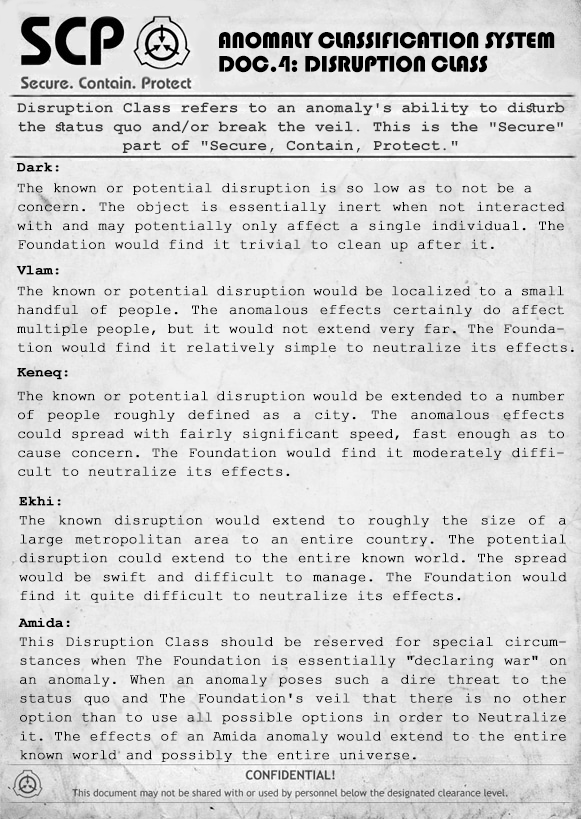
<style>
.page{position:relative;width:581px;height:819px}
.page>*{position:absolute;margin:0}
.t1{font:23.6px/23.6px "Bauhaus93";letter-spacing:-0.025em;color:#000000;text-transform:uppercase}
.t2{font:15.7px "CourierNewPS-BoldMT";letter-spacing:0.01em;color:#343434}
.t3{font:14.2px "CourierNewPS-BoldMT";color:#000000;font-weight:bold}
.t4{font:14.2px/18.9px "CourierNewPSMT";color:#000000;font-weight:bold}
.t5{font:14.2px/18.9px "CourierNewPS-BoldMT";color:#000000;font-weight:bold}
</style>
<div class="page">
<p class="t1" style="left:219px;top:32px;width:336px;height:41px">Anomaly Classification System<br>Doc.4: Disruption Class</p>
<p class="t2" style="left:17px;top:102px;width:548px;height:51px;text-align:center">Disruption Class refers to an anomaly's ability to disturb the status quo and/or break the veil. This is the "Secure" part of "Secure, Contain, Protect."</p>
<p class="t3" style="left:17px;top:162px;width:42px;height:10px">Dark:</p>
<p class="t4" style="left:17px;top:183px;width:548px;height:69px;text-align:justify">The known or potential disruption is so low as to not be a<br>concern. The object is essentially inert when not interacted with and may potentially only affect a single individual. The Foundation would find it trivial to clean up after it.</p>
<p class="t3" style="left:16px;top:265px;width:43px;height:10px">Vlam:</p>
<p class="t4" style="left:17px;top:286px;width:557px;height:69px;text-align:justify">The known or potential disruption would be localized to a small handful of people. The anomalous effects certainly do affect multiple people, but it would not extend very far. The Foundation would find it relatively simple to neutralize its effects.</p>
<p class="t3" style="left:17px;top:368px;width:51px;height:12px">Keneq:</p>
<p class="t4" style="left:17px;top:391px;width:548px;height:85px;text-align:justify">The known or potential disruption would be extended to a number of people roughly defined as a city. The anomalous effects could spread with fairly significant speed, fast enough as to cause concern. The Foundation would find it moderately difficult to neutralize its effects.</p>
<p class="t4" style="left:19px;top:496px;width:548px;height:107px;text-align:justify"><span class="t5">Ekhi:<br></span>The known disruption would extend to roughly the size of a large metropolitan area to an entire country. The potential disruption could extend to the entire known world. The spread would be swift and difficult to manage. The Foundation would find it quite difficult to neutralize its effects.</p>
<p class="t4" style="left:18px;top:618px;width:549px;height:144px;text-align:justify"><span class="t5">Amida:<br></span>This Disruption Class should be reserved for special circumstances when The Foundation is essentially "declaring war" on an anomaly. When an anomaly poses such a dire threat to the status quo and The Foundation's veil that there is no other option than to use all possible options in order to Neutralize it. The effects of an Amida anomaly would extend to the entire known world and possibly the entire universe.</p>
</div>
